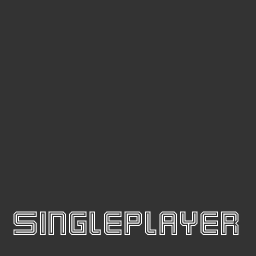
<style>
.page{position:relative;width:256px;height:256px;background:#333333}
.page>*{position:absolute;margin:0}
.t1{font:30px "KarnivoreTecca";color:#ffffff}
</style>
<div class="page">
<p class="t1" style="left:13px;top:211px;width:226px;height:24px">Singleplayer</p>
</div>
